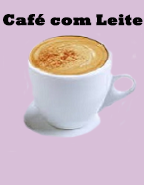
<style>
.page{position:relative;width:144px;height:185px;background:#d8bfd8}
.page>*{position:absolute;margin:0}
.t1{font:15.3px "Rockwell-ExtraBold";color:#030303;font-weight:bold}
</style>
<div class="page">
<p class="t1" style="left:3px;top:14px;width:140px;height:12px">Café com Leite</p>
</div>
